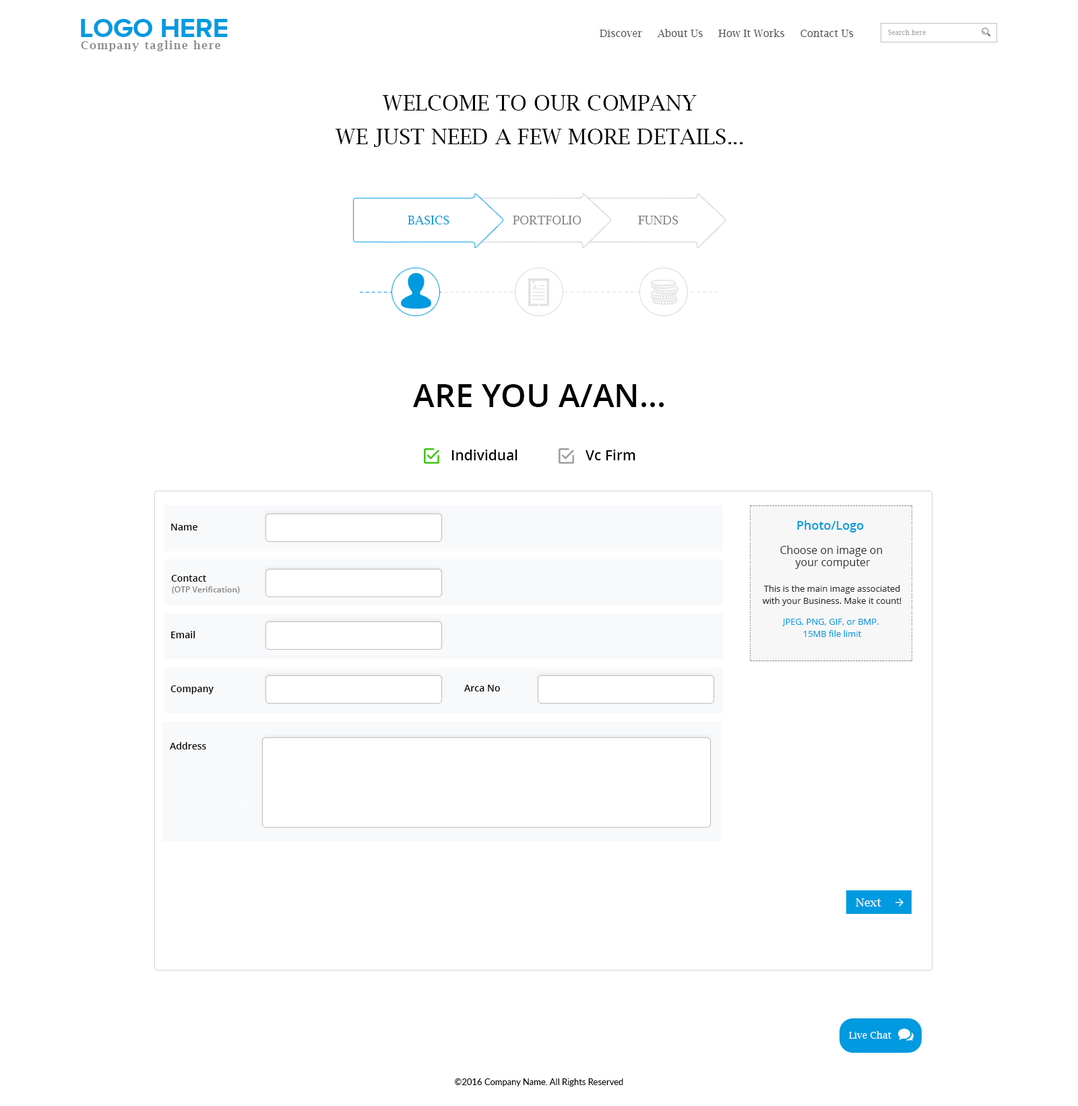
<style>
.page{position:relative;width:1078px;height:1106px;background:#ffffff}
.page>*{position:absolute;margin:0}
.t1{font:27px "ProximaNovaA-Bold";color:#009ae1;text-transform:uppercase}
.t2{font:10.1px "LucidaBright";color:#585858}
.t3{font:6.7px "LucidaBright";color:#afafaf}
.t4{font:10.8px "LucidaBright-Demi";letter-spacing:0.1em;color:#898989}
.t5{font:21.6px/33.7px "LucidaBright";color:#000000;text-transform:uppercase}
.t6{font:12.1px "LucidaBright";color:#009ae1}
.t7{font:12.1px "LucidaBright";color:#818181}
.t8{font:12.1px "LucidaBright";color:#818181;text-transform:uppercase}
.t9{font:14.2px "LucidaBright";letter-spacing:0.1em;color:#e1e1e1}
.t10{font:14.2px "LucidaBright";letter-spacing:0.1em;color:#009ae1}
.t11{font:32.3px "OpenSans-Semibold";color:#000000;text-transform:uppercase}
.t12{font:14.2px "OpenSans-Semibold";color:#000000}
.t13{font:8.1px "ArialMT";color:#888888;scale:0.85 1}
.t14{font:8.1px "ArialMT";color:#888888}
.t15{font:12.1px "OpenSans-Semibold";color:#009ae1}
.t16{font:9.4px "OpenSans-Semibold";color:#000000}
.t17{font:10.8px/12.1px "OpenSans";color:#2e2e2e}
.t18{font:8.1px "OpenSans-Semibold";color:#838383}
.t19{font:8.8px/12.1px "OpenSans";color:#2e2e2e}
.t20{font:8.8px/12.1px "OpenSans";color:#009ae1}
.t21{font:6.9px "ArialMT";color:#888888;scale:1.17 1}
.t22{font:9.9px "OpenSans-Semibold";color:#ffffff}
.t23{font:11.5px "LucidaBright";color:#ffffff}
.t24{font:9.4px "LucidaBright";color:#ffffff}
.t25{font:8.8px "Lato-Regular";color:#000000}
</style>
<div class="page">
<p class="t1" style="left:81px;top:19px;width:147px;height:18px">Logo HERE</p>
<p class="t2" style="left:600px;top:29px;width:254px;height:8px">Discover     About Us     How It Works     Contact Us</p>
<p class="t3" style="left:888px;top:30px;width:38px;height:5px">Search here</p>
<p class="t4" style="left:81px;top:40px;width:139px;height:11px">Company tagline here</p>
<p class="t5" style="left:336px;top:95px;width:407px;height:52px;text-align:center">Welcome to our company<br>we just need a few more details...</p>
<p class="t6" style="left:408px;top:216px;width:41px;height:8px">BASICS</p>
<p class="t7" style="left:513px;top:216px;width:69px;height:8px">PORTFOLIO</p>
<p class="t8" style="left:638px;top:216px;width:41px;height:8px">FUNDS</p>
<p class="t9" style="left:359px;top:292px;width:359px;height:0px"><span class="t10">--------------</span>----------------------------------------------</p>
<p class="t11" style="left:413px;top:384px;width:251px;height:23px">Are you a/an...</p>
<p class="t12" style="left:452px;top:449px;width:66px;height:11px">Individual</p>
<p class="t12" style="left:586px;top:449px;width:49px;height:11px">Vc Firm</p>
<p class="t13" style="left:750px;top:505px;width:1px;height:155px;rotate:90deg">--------------------------------------------------------------------</p>
<p class="t14" style="left:751px;top:505px;width:161px;height:1px">------------------------------------------------------------</p>
<p class="t13" style="left:912px;top:505px;width:0px;height:155px;rotate:90deg">--------------------------------------------------------------------</p>
<p class="t15" style="left:797px;top:520px;width:67px;height:12px">Photo/Logo</p>
<p class="t16" style="left:171px;top:524px;width:26px;height:6px">Name</p>
<p class="t17" style="left:780px;top:545px;width:103px;height:24px;text-align:center">Choose on image on <br>your computer</p>
<p class="t16" style="left:171px;top:575px;width:35px;height:7px">Contact</p>
<p class="t18" style="left:172px;top:586px;width:68px;height:8px">(OTP Verification)</p>
<p class="t19" style="left:762px;top:585px;width:140px;height:21px;text-align:center">This is the main image associated with your Business. Make it count!</p>
<p class="t20" style="left:782px;top:619px;width:97px;height:18px;text-align:center">JPEG, PNG, GIF, or BMP. <br>15MB file limit</p>
<p class="t16" style="left:171px;top:631px;width:24px;height:7px">Email</p>
<p class="t21" style="left:751px;top:660px;width:161px;height:1px">------------------------------------------------------------</p>
<p class="t16" style="left:170px;top:685px;width:44px;height:9px">Company</p>
<p class="t16" style="left:464px;top:685px;width:36px;height:6px">Arca No</p>
<p class="t16" style="left:170px;top:742px;width:36px;height:7px">Address</p>
<p class="t22" style="left:239px;top:804px;width:4px;height:7px">?</p>
<p class="t23" style="left:856px;top:898px;width:25px;height:8px">Next</p>
<p class="t24" style="left:849px;top:1031px;width:43px;height:7px">Live Chat</p>
<p class="t25" style="left:455px;top:1078px;width:168px;height:8px">©2016 Company Name. All Rights Reserved</p>
</div>
